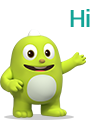
<style>
.page{position:relative;width:104px;height:120px;background:#ffffff}
.page>*{position:absolute;margin:0}
.t1{font:24px "Roboto-Medium";letter-spacing:-0.04em;color:#12a396}
</style>
<div class="page">
<p class="t1" style="left:70px;top:9px;width:20px;height:18px">Hi</p>
</div>
